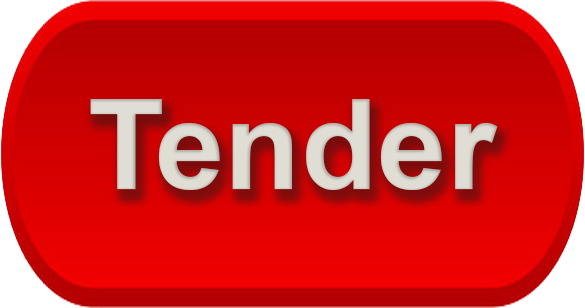
<style>
.page{position:relative;width:585px;height:308px}
.page>*{position:absolute;margin:0}
.t1{font:125px "Arial-BoldMT";color:#e0ddd4}
</style>
<div class="page">
<p class="t1" style="left:90px;top:99px;width:408px;height:91px">Tender</p>
</div>
